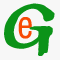
<style>
.page{position:relative;width:60px;height:60px;background:#f7f7f7}
.page>*{position:absolute;margin:0}
.t1{font:49.6px "VNI-Thufap2-Normal";color:#0b9318}
.t2{font:36.5px "VNI-Helve-Condense";color:#f74904}
</style>
<div class="page">
<p class="t1" style="left:4px;top:3px;width:51px;height:53px;rotate:4deg">G</p>
<p class="t2" style="left:18px;top:17px;width:14px;height:22px">e</p>
</div>
